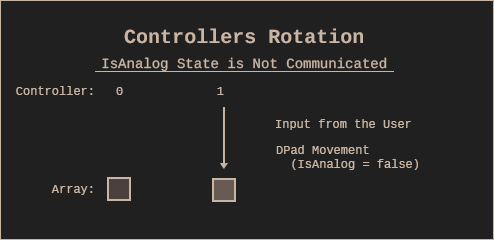
<style>
.page{position:relative;width:494px;height:240px;background:#202020}
.page>*{position:absolute;margin:0}
.t1{font:20px "LiberationMono-Bold";color:#c9b5a4}
.t2{font:14px "LiberationMono";color:#c9b5a4}
.t3{font:12px "LiberationMono";color:#c9b5a4}
</style>
<div class="page">
<p class="t1" style="left:124px;top:28px;width:239px;height:16px">Controllers Rotation</p>
<p class="t2" style="left:102px;top:57px;width:285px;height:15px">IsAnalog State is Not Communicated</p>
<p class="t3" style="left:16px;top:86px;width:77px;height:9px">Controller:</p>
<p class="t3" style="left:116px;top:87px;width:108px;height:8px">0             1</p>
<p class="t3" style="left:276px;top:119px;width:135px;height:11px">Input from the User</p>
<p class="t3" style="left:276px;top:145px;width:142px;height:25px">DPad Movement <br>  (IsAnalog = false)</p>
<p class="t3" style="left:51px;top:185px;width:42px;height:10px">Array:</p>
</div>
